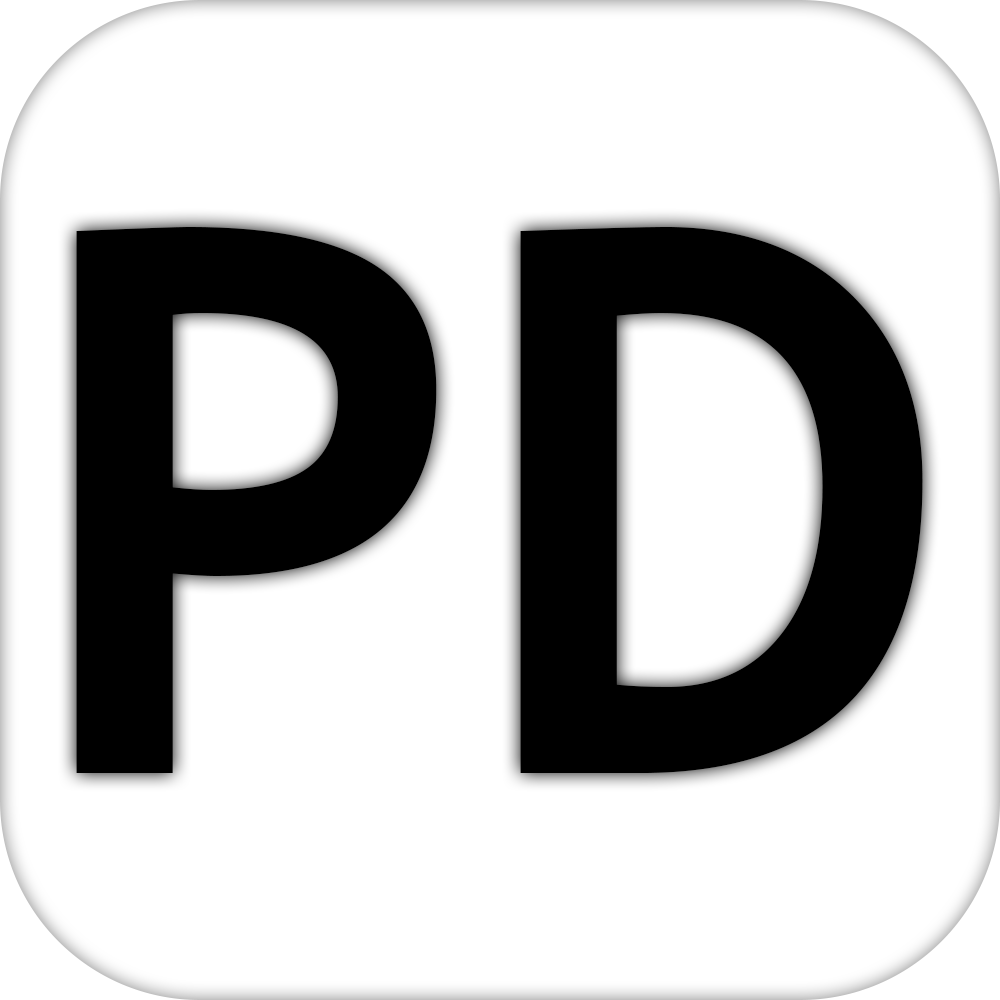
<style>
.page{position:relative;width:1000px;height:1000px;background:#ffffff}
.page>*{position:absolute;margin:0}
.t1{font:757.6px "TrebuchetMS-Bold";color:#000000}
</style>
<div class="page">
<p class="t1" style="left:76px;top:227px;width:847px;height:546px">PD</p>
</div>
